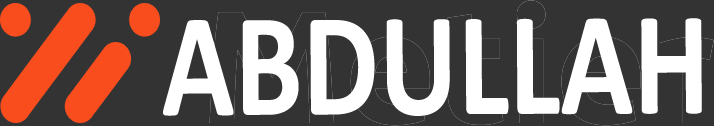
<style>
.page{position:relative;width:714px;height:126px;background:#333333}
.page>*{position:absolute;margin:0}
.t1{font:149.3px "Calibri-Bold";color:#ffffff;scale:0.81 1}
</style>
<div class="page">
<p class="t1" style="left:163px;top:18px;width:539px;height:98px">ABDULLAH</p>
</div>
